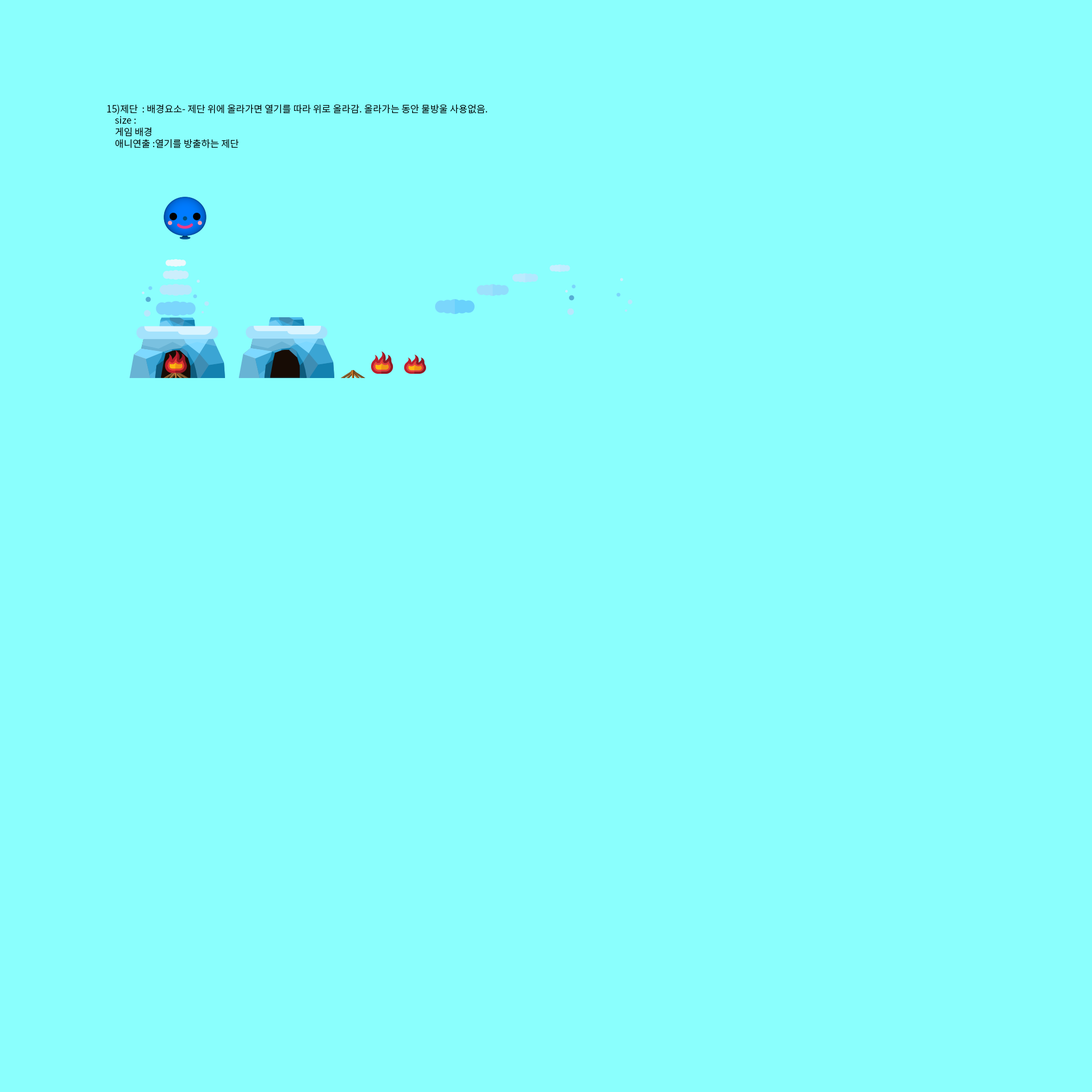
<style>
.page{position:relative;width:1092px;height:1092px;background:#8afffd}
.page>*{position:absolute;margin:0}
.t1{font:9.6px "NotoSansCJKkr-DemiLight";color:#000000}
</style>
<div class="page">
<p class="t1" style="left:107px;top:104px;width:380px;height:44px">15)제단  : 배경요소- 제단 위에 올라가면 열기를 따라 위로 올라감. 올라가는 동안 물방울 사용없음.<br>    size : <br>    게임 배경<br>    애니연출 :열기를 방출하는 제단</p>
</div>
